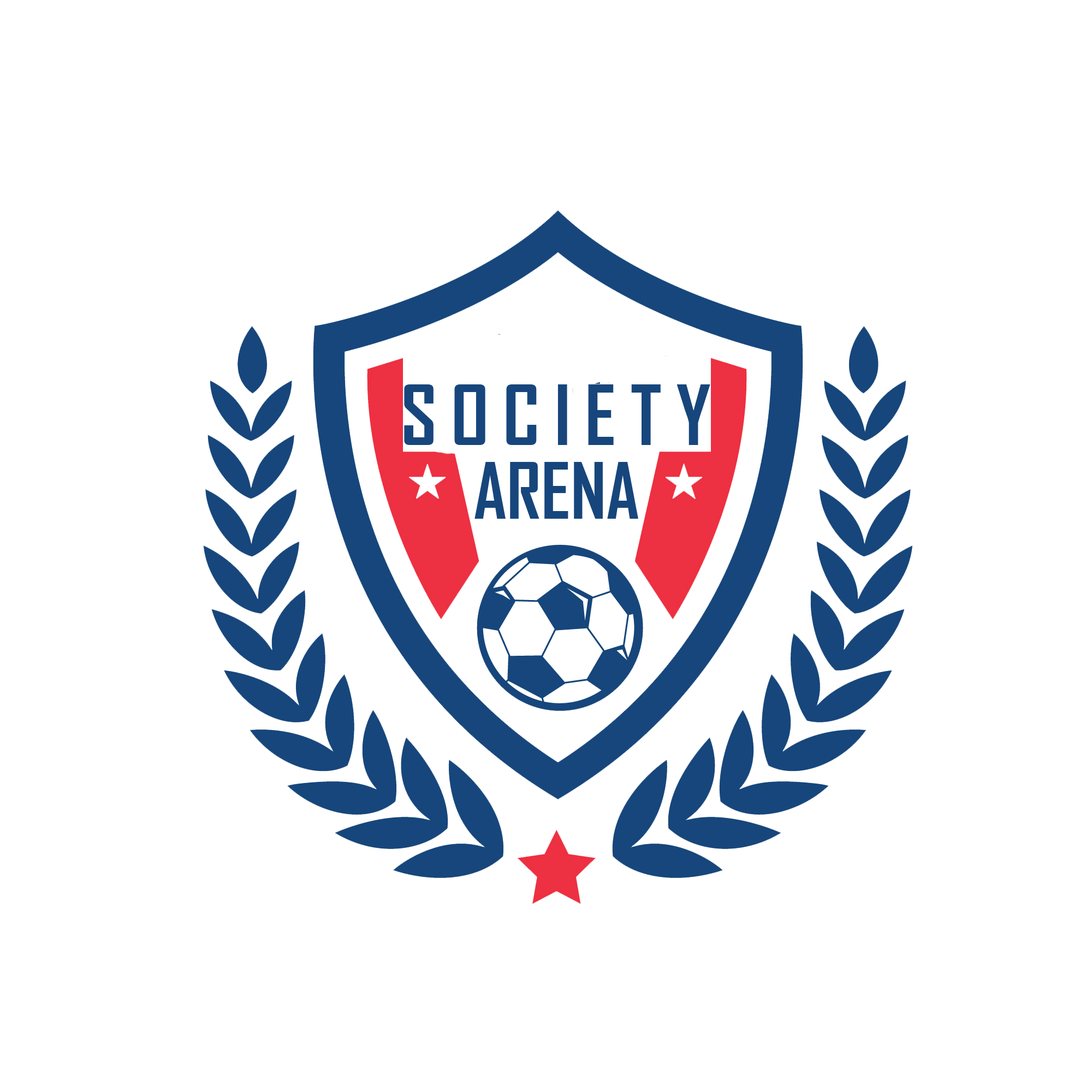
<style>
.page{position:relative;width:1092px;height:1092px;background:#ffffff}
.page>*{position:absolute;margin:0}
.t1{font:79.2px "AgencyFB-Bold";letter-spacing:0.18em;color:#17467c}
.t2{font:74.3px "AgencyFB-Bold";color:#17467c}
</style>
<div class="page">
<p class="t1" style="left:404px;top:384px;width:306px;height:61px">SOCIETY</p>
<p class="t2" style="left:474px;top:462px;width:164px;height:57px">ARENA</p>
</div>
